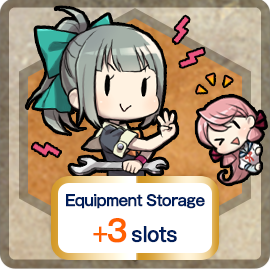
<style>
.page{position:relative;width:270px;height:270px}
.page>*{position:absolute;margin:0}
.t1{font:15px "GothicMB101Pro-Medium";letter-spacing:-0.04em;color:#001d59;font-weight:bold;scale:0.9 1}
.t2{font:20px "GothicMB101Pro-Medium";letter-spacing:-0.04em;color:#ff6000;font-weight:bold;scale:0.9 1}
.t3{font:30px "GothicMB101Pro-Medium";letter-spacing:-0.04em;color:#ff6000;font-weight:bold;scale:0.9 1}
.t4{font:20px "GothicMB101Pro-Medium";letter-spacing:-0.04em;color:#001d59;font-weight:bold;scale:0.9 1}
</style>
<div class="page">
<p class="t1" style="left:66px;top:194px;width:139px;height:49px;text-align:center">Equipment Storage<br><span class="t2">+</span><span class="t3">3 </span><span class="t4">slots</span></p>
</div>
